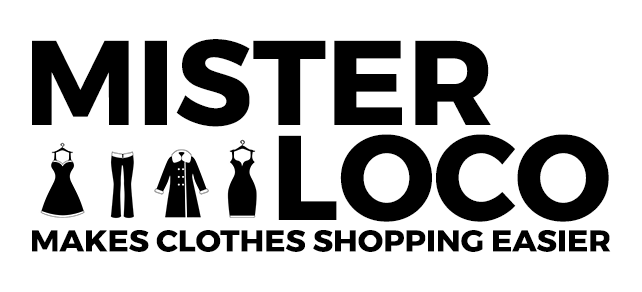
<style>
.page{position:relative;width:642px;height:292px;background:#ffffff}
.page>*{position:absolute;margin:0}
.t1{font:120px "Montserrat-Bold";color:#000000}
.t2{font:29.9px "Montserrat-Bold";color:#000000;scale:1.05 1}
</style>
<div class="page">
<p class="t1" style="left:32px;top:39px;width:459px;height:88px">MISTER</p>
<p class="t1" style="left:278px;top:134px;width:331px;height:88px">LOCO</p>
<p class="t2" style="left:32px;top:230px;width:579px;height:22px">MAKES CLOTHES SHOPPING EASIER</p>
</div>
